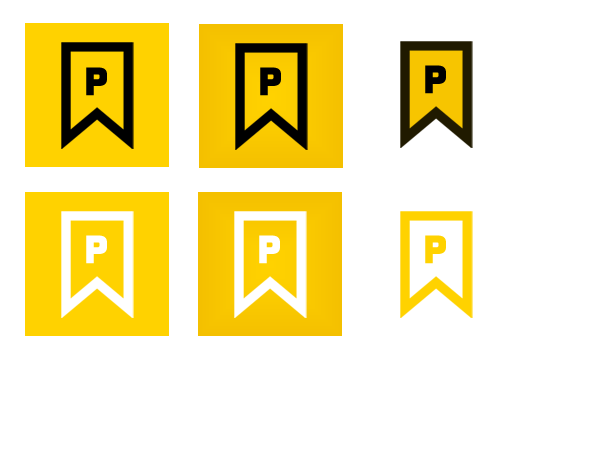
<style>
.page{position:relative;width:614px;height:460px;background:#ffffff}
.page>*{position:absolute;margin:0}
.t1{font:40px "CPMono-Black";color:#000000}
.t2{font:40px "CPMono-Black";color:#ffffff}
.t3{font:40px "CPMono-Black";color:#ffd200}
</style>
<div class="page">
<p class="t1" style="left:425px;top:65px;width:21px;height:29px">P</p>
<p class="t1" style="left:86px;top:67px;width:21px;height:29px">P</p>
<p class="t1" style="left:260px;top:67px;width:21px;height:29px">P</p>
<p class="t2" style="left:86px;top:235px;width:21px;height:29px">P</p>
<p class="t2" style="left:259px;top:235px;width:21px;height:29px">P</p>
<p class="t3" style="left:425px;top:235px;width:21px;height:29px">P</p>
</div>
